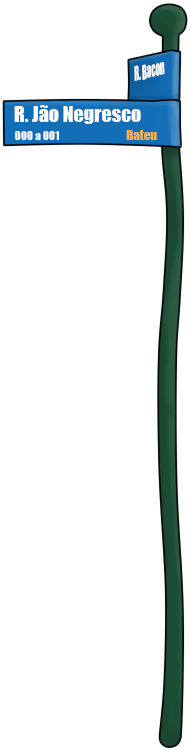
<style>
.page{position:relative;width:190px;height:750px;background:#ffffff}
.page>*{position:absolute;margin:0}
.t1{font:18.6px "Impact";color:#ffffff;scale:0.48 1}
.t2{font:20.1px "Impact";color:#ffffff}
.t3{font:11.4px "Impact";color:#ffffff}
.t4{font:12.9px "Impact";color:#f6b349}
</style>
<div class="page">
<p class="t1" style="left:134px;top:62px;width:31px;height:19px;rotate:-14deg">R. Bacon</p>
<p class="t2" style="left:14px;top:105px;width:127px;height:19px">R. Jão Negresco</p>
<p class="t3" style="left:15px;top:131px;width:44px;height:9px">000 a 001</p>
<p class="t4" style="left:126px;top:130px;width:31px;height:10px">Bateu</p>
</div>
